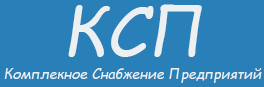
<style>
.page{position:relative;width:264px;height:87px;background:#2980b9}
.page>*{position:absolute;margin:0}
.t1{font:69px "ComicSansMS-Italic";color:#ecf0f1}
.t2{font:14px "ComicSansMS-Italic";color:#ecf0f1}
</style>
<div class="page">
<p class="t1" style="left:68px;top:4px;width:134px;height:53px">КСП</p>
<p class="t2" style="left:4px;top:68px;width:258px;height:15px">Комплекное Снабжение Предприятий</p>
</div>
